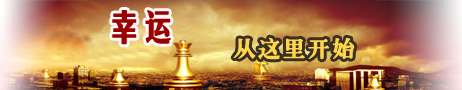
<style>
.page{position:relative;width:462px;height:90px}
.page>*{position:absolute;margin:0}
.t1{font:36px "ç»å¸ç¾é»ç®-regular";letter-spacing:-0.1em;color:#9b0101;font-weight:bold}
.t2{font:22px "CTLaoSongSJ";letter-spacing:0.1em;color:#ffd54b;font-weight:bold}
</style>
<div class="page">
<p class="t1" style="left:112px;top:10px;width:59px;height:35px">幸运</p>
<p class="t2" style="left:233px;top:37px;width:122px;height:23px">从这里开始</p>
</div>
